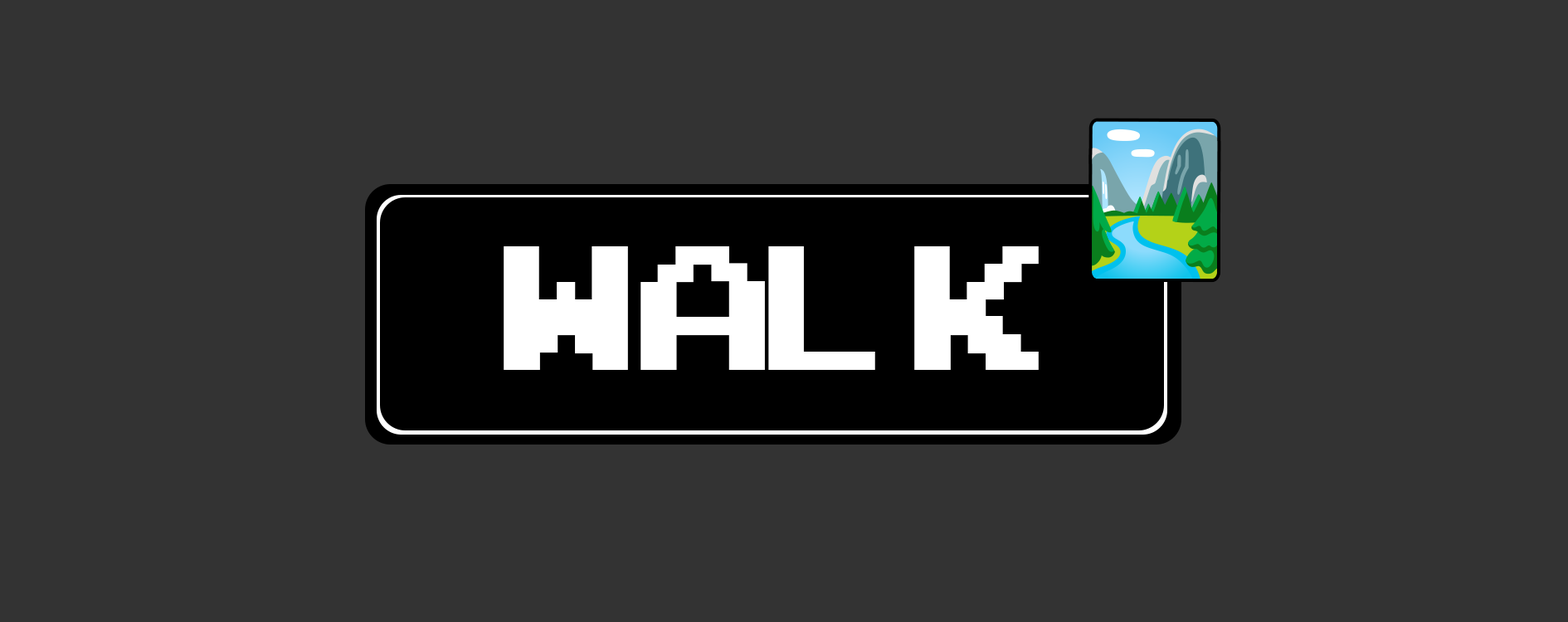
<style>
.page{position:relative;width:1568px;height:622px;background:#333333}
.page>*{position:absolute;margin:0}
.t1{font:248.9px "ArcadeClassic";color:#ffffff}
</style>
<div class="page">
<p class="t1" style="left:504px;top:246px;width:535px;height:124px">WALK</p>
</div>
